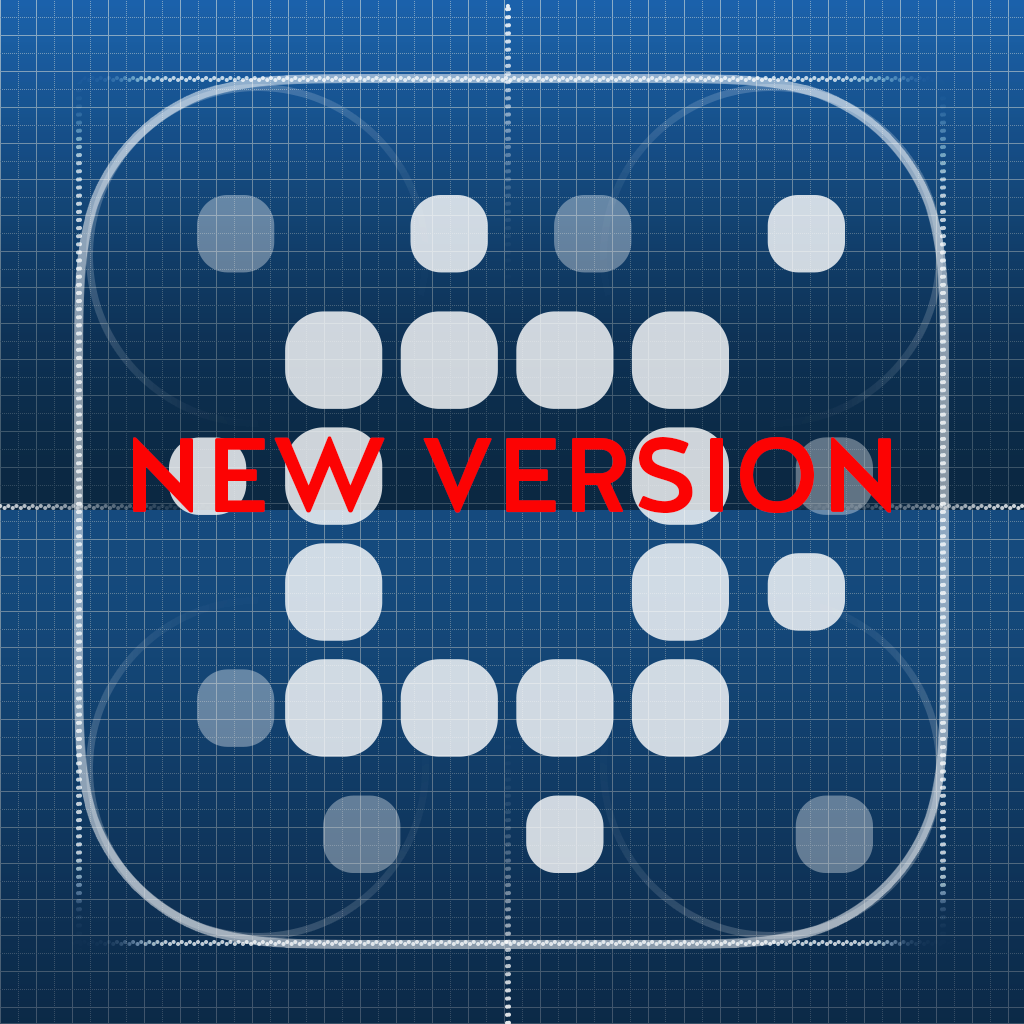
<style>
.page{position:relative;width:1024px;height:1024px}
.page>*{position:absolute;margin:0}
.t1{font:106px "HalisR-Medium";color:#fc0303;text-transform:uppercase}
</style>
<div class="page">
<p class="t1" style="left:133px;top:436px;width:758px;height:78px">NEW VERSION</p>
</div>
